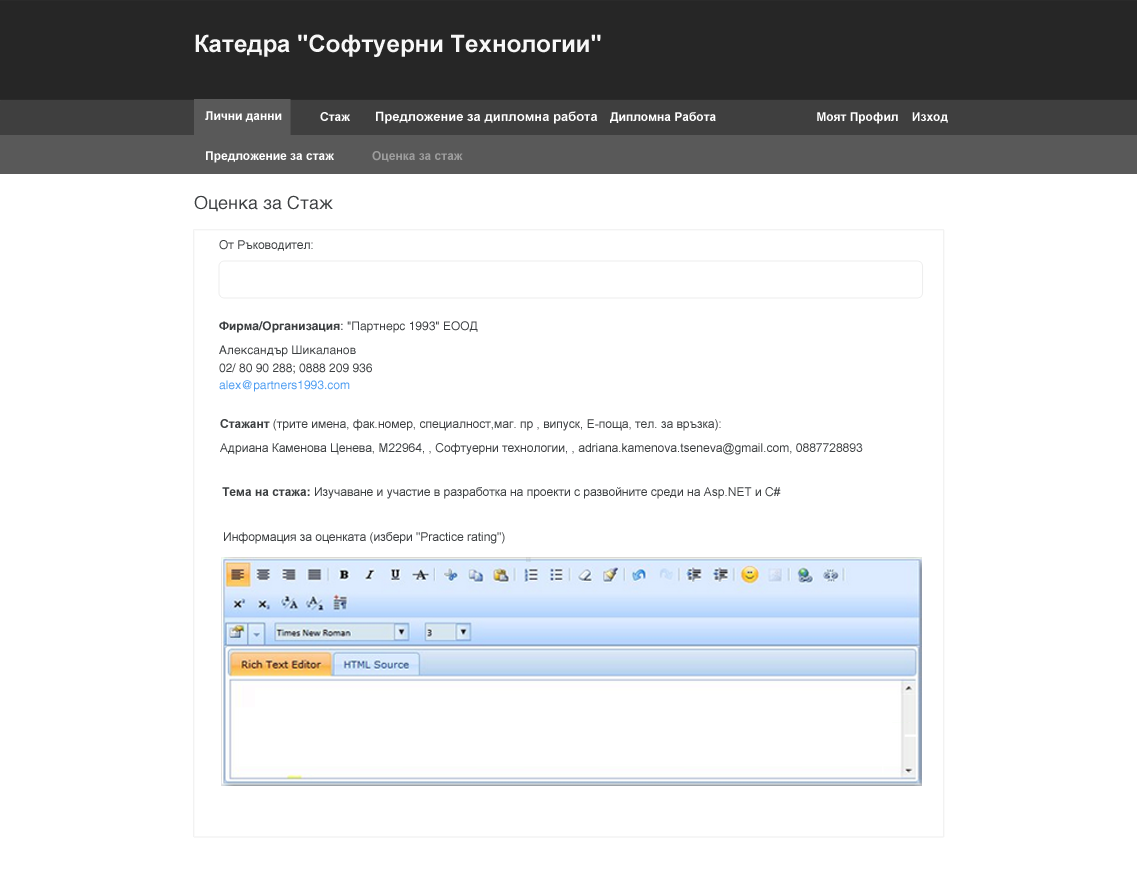
<style>
.page{position:relative;width:1137px;height:887px;background:#ffffff}
.page>*{position:absolute;margin:0}
.t1{font:24px "Arial-BoldMT";color:#f8f8f8}
.t2{font:12px "Arial-BoldMT";color:#ffffff}
.t3{font:13px "Arial-BoldMT";color:#ffffff}
.t4{font:12px "Arial-BoldMT";color:#9d9d9d}
.t5{font:18px "HelveticaLTStd-Roman";color:#3c3f41}
.t6{font:12px "ArialMT";color:#3c3f41}
.t7{font:12px "HelveticaLTStd-Roman";color:#3c3f41}
.t8{font:12px "HelveticaLTStd-Bold";color:#3c3f41}
.t9{font:12px/18px "HelveticaLTStd-Roman";color:#3c3f41}
.t10{font:12px/24px "HelveticaLTStd-Roman";color:#3c3f41}
.t11{font:12px "HelveticaLTStd-Roman";color:#4c9cf1}
.t12{font:12px/24px "ArialMT";color:#3c3f41}
.t13{font:12px/24px "Arial-BoldMT";color:#3c3f41}
.t14{font:12px/18px "ArialMT";color:#3c3f41}
.t15{font:12px "Arial-BoldMT";color:#3c3f41}
</style>
<div class="page">
<p class="t1" style="left:195px;top:34px;width:406px;height:23px">Катедра "Софтуерни Технологии"</p>
<p class="t2" style="left:205px;top:111px;width:77px;height:11px">Лични данни</p>
<p class="t2" style="left:320px;top:112px;width:30px;height:9px">Стаж</p>
<p class="t3" style="left:376px;top:111px;width:222px;height:13px">Предложение за дипломна работа</p>
<p class="t2" style="left:610px;top:112px;width:106px;height:11px">Дипломна Работа</p>
<p class="t2" style="left:817px;top:112px;width:131px;height:12px">Моят Профил    Изход</p>
<p class="t2" style="left:206px;top:151px;width:128px;height:12px">Предложение за стаж</p>
<p class="t4" style="left:372px;top:151px;width:91px;height:11px">Оценка за стаж</p>
<p class="t5" style="left:194px;top:195px;width:139px;height:17px">Оценка за Стаж</p>
<p class="t6" style="left:219px;top:240px;width:94px;height:11px">От Ръководител:</p>
<p class="t7" style="left:219px;top:321px;width:259px;height:12px"><span class="t8">Фирма/Организация</span>: "Партнерс 1993" ЕООД</p>
<p class="t9" style="left:219px;top:345px;width:153px;height:29px"><span class="t10"><br>Александър Шикаланов<br></span>02/ 80 90 288; 0888 209 936</p>
<p class="t11" style="left:219px;top:380px;width:131px;height:12px">alex@partners1993.com</p>
<p class="t12" style="left:220px;top:419px;width:643px;height:36px"><span class="t13">Стажант</span> (трите имена, фак.номер, специалност,маг. пр , випуск, Е-поща, тел. за връзка):<br>Адриана Каменова Ценева, М22964, , Софтуерни технологии, , adriana.kamenova.tseneva@gmail.com, <span class="t14">0887728893</span></p>
<p class="t6" style="left:222px;top:487px;width:559px;height:12px"><span class="t15">Тема на стажа: </span>Изучаване и участие в разработка на проекти с развойните среди на Asp.NET и C#</p>
<p class="t6" style="left:224px;top:532px;width:281px;height:12px">Информация за оценката (избери "Practice rating")</p>
</div>
